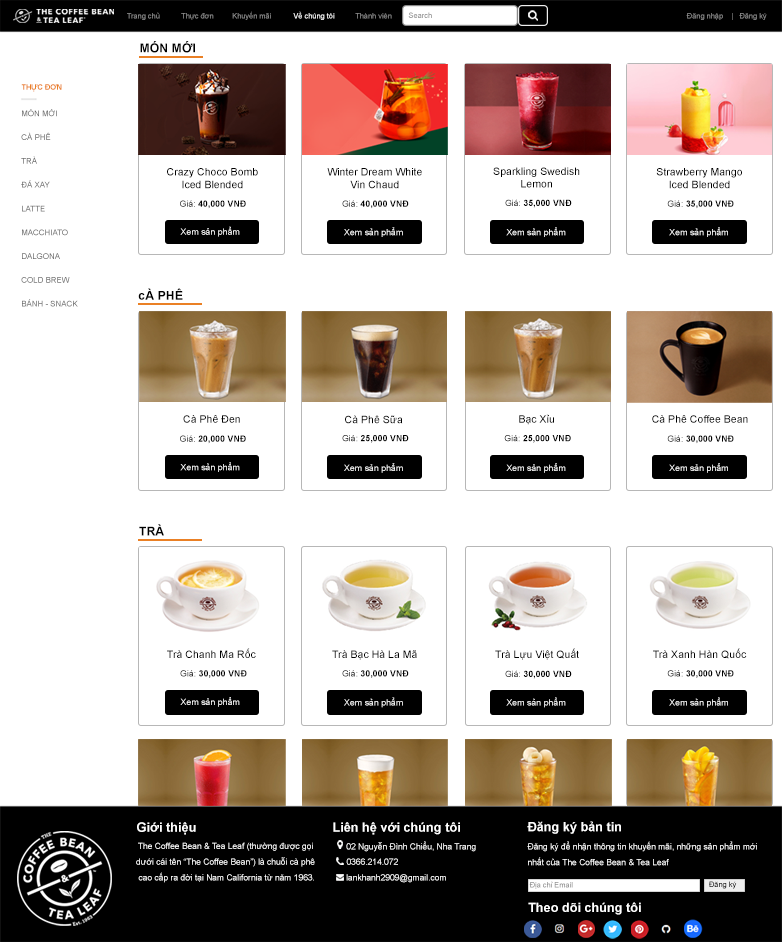
<style>
.page{position:relative;width:782px;height:942px;background:#ffffff}
.page>*{position:absolute;margin:0}
.t1{font:7.4px "ArialMT";color:#8a8a8a}
.t2{font:7.4px "ArialMT";color:#ffffff}
.t3{font:7.4px "ArialMT"}
.t4{font:12.3px "Arial-BoldMT";color:#000000}
.t5{font:7.4px "Arial-BoldMT";color:#ea8025}
.t6{font:7.9px/23.8px "ArialMT";color:#6b6b6b}
.t7{font:10.6px "ArialMT";color:#000000}
.t8{font:8.8px "Arial-BoldMT";color:#000000}
.t9{font:8.8px "ArialMT";color:#000000}
.t10{font:8.8px "ArialMT";color:#ffffff}
.t11{font:12.7px "Arial-BoldMT";color:#ffffff}
.t12{font:8.4px/15.8px "ArialMT";color:#ffffff}
.t13{font:8.4px "ArialMT";color:#ffffff}
.t14{font:7.4px "ArialMT";color:#8e8e8e}
</style>
<div class="page">
<p class="t1" style="left:127px;top:11px;width:265px;height:9px">Trang chủ         Thực đơn      Khuyến mãi        <span class="t2">Về chúng tôi  </span>Thành viên</p>
<p class="t3" style="left:408px;top:12px;width:24px;height:6px">Search</p>
<p class="t1" style="left:686px;top:13px;width:81px;height:7px">Đăng nhập    |   Đăng ký</p>
<p class="t4" style="left:140px;top:41px;width:55px;height:12px">MÓN MỚI</p>
<p class="t5" style="left:21px;top:84px;width:41px;height:8px">THỰC ĐƠN</p>
<p class="t6" style="left:21px;top:109px;width:57px;height:198px">MÓN MỚI<br>CÀ PHÊ<br>TRÀ <br>ĐÁ XAY <br>LATTE<br>MACCHIATO <br>DALGONA<br>COLD BREW<br>BÁNH - SNACK</p>
<p class="t7" style="left:167px;top:168px;width:91px;height:21px;text-align:center">Crazy Choco Bomb<br>Iced Blended</p>
<p class="t7" style="left:327px;top:168px;width:95px;height:21px;text-align:center">Winter Dream White<br>Vin Chaud</p>
<p class="t7" style="left:493px;top:167px;width:87px;height:21px;text-align:center">Sparkling Swedish<br>Lemon</p>
<p class="t7" style="left:656px;top:168px;width:86px;height:21px;text-align:center">Strawberry Mango<br>Iced Blended</p>
<p class="t8" style="left:180px;top:200px;width:66px;height:9px"><span class="t9">Giá: </span>40,000 VNĐ</p>
<p class="t8" style="left:342px;top:200px;width:67px;height:9px"><span class="t9">Giá: </span>40,000 VNĐ</p>
<p class="t8" style="left:505px;top:199px;width:67px;height:9px"><span class="t9">Giá: </span>35,000 VNĐ</p>
<p class="t8" style="left:667px;top:200px;width:67px;height:9px"><span class="t9">Giá: </span>35,000 VNĐ</p>
<p class="t10" style="left:180px;top:226px;width:60px;height:11px">Xem sản phẩm</p>
<p class="t10" style="left:344px;top:227px;width:59px;height:10px">Xem sản phẩm</p>
<p class="t10" style="left:506px;top:227px;width:60px;height:10px">Xem sản phẩm</p>
<p class="t10" style="left:669px;top:227px;width:59px;height:10px">Xem sản phẩm</p>
<p class="t4" style="left:138px;top:288px;width:45px;height:12px">cÀ PHÊ</p>
<p class="t7" style="left:519px;top:414px;width:35px;height:11px">Bạc Xỉu</p>
<p class="t7" style="left:183px;top:415px;width:57px;height:8px">Cà Phê Đen</p>
<p class="t7" style="left:345px;top:415px;width:58px;height:9px">Cà Phê Sữa</p>
<p class="t7" style="left:652px;top:415px;width:96px;height:8px">Cà Phê Coffee Bean</p>
<p class="t8" style="left:180px;top:435px;width:66px;height:9px"><span class="t9">Giá: </span>20,000 VNĐ</p>
<p class="t8" style="left:342px;top:435px;width:67px;height:8px"><span class="t9">Giá: </span>25,000 VNĐ</p>
<p class="t8" style="left:504px;top:435px;width:67px;height:8px"><span class="t9">Giá: </span>25,000 VNĐ</p>
<p class="t8" style="left:667px;top:435px;width:67px;height:9px"><span class="t9">Giá: </span>30,000 VNĐ</p>
<p class="t10" style="left:180px;top:462px;width:60px;height:10px">Xem sản phẩm</p>
<p class="t10" style="left:344px;top:463px;width:59px;height:10px">Xem sản phẩm</p>
<p class="t10" style="left:506px;top:463px;width:60px;height:10px">Xem sản phẩm</p>
<p class="t10" style="left:669px;top:463px;width:59px;height:10px">Xem sản phẩm</p>
<p class="t4" style="left:139px;top:524px;width:25px;height:12px">TRÀ</p>
<p class="t7" style="left:167px;top:648px;width:89px;height:10px">Trà Chanh Ma Rốc</p>
<p class="t7" style="left:332px;top:650px;width:85px;height:10px">Trà Bạc Hà La Mã</p>
<p class="t7" style="left:495px;top:648px;width:84px;height:12px">Trà Lựu Việt Quất</p>
<p class="t7" style="left:653px;top:648px;width:94px;height:11px">Trà Xanh Hàn Quốc</p>
<p class="t8" style="left:180px;top:670px;width:67px;height:8px"><span class="t9">Giá: </span>30,000 VNĐ</p>
<p class="t8" style="left:342px;top:670px;width:67px;height:8px"><span class="t9">Giá: </span>30,000 VNĐ</p>
<p class="t8" style="left:505px;top:670px;width:67px;height:9px"><span class="t9">Giá: </span>30,000 VNĐ</p>
<p class="t8" style="left:667px;top:670px;width:67px;height:8px"><span class="t9">Giá: </span>30,000 VNĐ</p>
<p class="t10" style="left:180px;top:697px;width:60px;height:10px">Xem sản phẩm</p>
<p class="t10" style="left:344px;top:697px;width:59px;height:11px">Xem sản phẩm</p>
<p class="t10" style="left:506px;top:697px;width:60px;height:11px">Xem sản phẩm</p>
<p class="t10" style="left:669px;top:697px;width:59px;height:11px">Xem sản phẩm</p>
<p class="t11" style="left:137px;top:822px;width:59px;height:13px">Giới thiệu</p>
<p class="t11" style="left:333px;top:822px;width:127px;height:13px">Liên hệ với chúng tôi</p>
<p class="t11" style="left:527px;top:821px;width:94px;height:13px">Đăng ký bản tin</p>
<p class="t12" style="left:136px;top:842px;width:179px;height:41px;text-align:center">The Coffee Bean &amp; Tea Leaf (thường được gọi <br>dưới cái tên “The Coffee Bean”) là chuỗi cà phê <br>cao cấp ra đời tại Nam California từ năm 1963.</p>
<p class="t13" style="left:346px;top:841px;width:130px;height:11px">02 Nguyễn Đình Chiểu, Nha Trang</p>
<p class="t12" style="left:527px;top:841px;width:230px;height:25px">Đăng ký để nhận thông tin khuyến mãi, những sản phẩm mới <br>nhất của The Coffee Bean &amp; Tea Leaf</p>
<p class="t13" style="left:346px;top:858px;width:52px;height:7px">0366.214.072</p>
<p class="t13" style="left:346px;top:874px;width:100px;height:9px">lankhanh2909@gmail.com</p>
<p class="t14" style="left:529px;top:881px;width:44px;height:8px">Địa chỉ Email</p>
<p class="t3" style="left:709px;top:881px;width:28px;height:8px">Đăng ký</p>
<p class="t11" style="left:528px;top:902px;width:113px;height:13px">Theo dõi chúng tôi</p>
</div>
